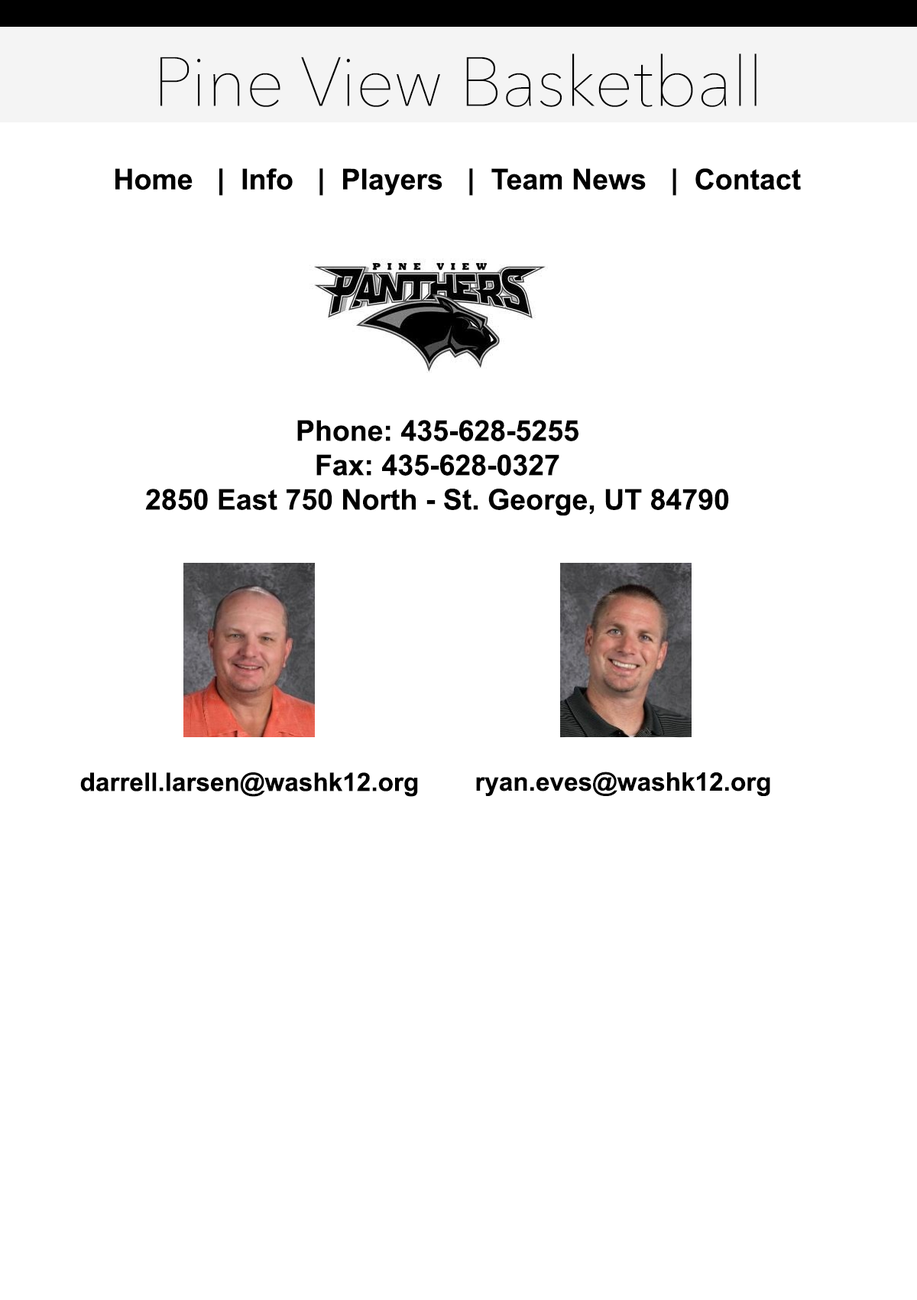
<style>
.page{position:relative;width:917px;height:1300px;background:#ffffff}
.page>*{position:absolute;margin:0}
.t1{font:68.8px "AvenirNext-UltraLight";color:#000000}
.t2{font:28.7px "Arial-BoldMT";color:#000000}
.t3{font:25.5px "Arial-BoldMT";color:#000000}
</style>
<div class="page">
<p class="t1" style="left:161px;top:54px;width:596px;height:53px">Pine View Basketball</p>
<p class="t2" style="left:115px;top:168px;width:686px;height:28px">Home   |  Info   |  Players   |  Team News   |  Contact</p>
<p class="t2" style="left:145px;top:420px;width:584px;height:96px;text-align:center">Phone: 435-628-5255<br>Fax: 435-628-0327<br>2850 East 750 North - St. George, UT 84790</p>
<p class="t3" style="left:80px;top:772px;width:338px;height:25px">darrell.larsen@washk12.org</p>
<p class="t3" style="left:476px;top:771px;width:295px;height:25px">ryan.eves@washk12.org</p>
</div>
